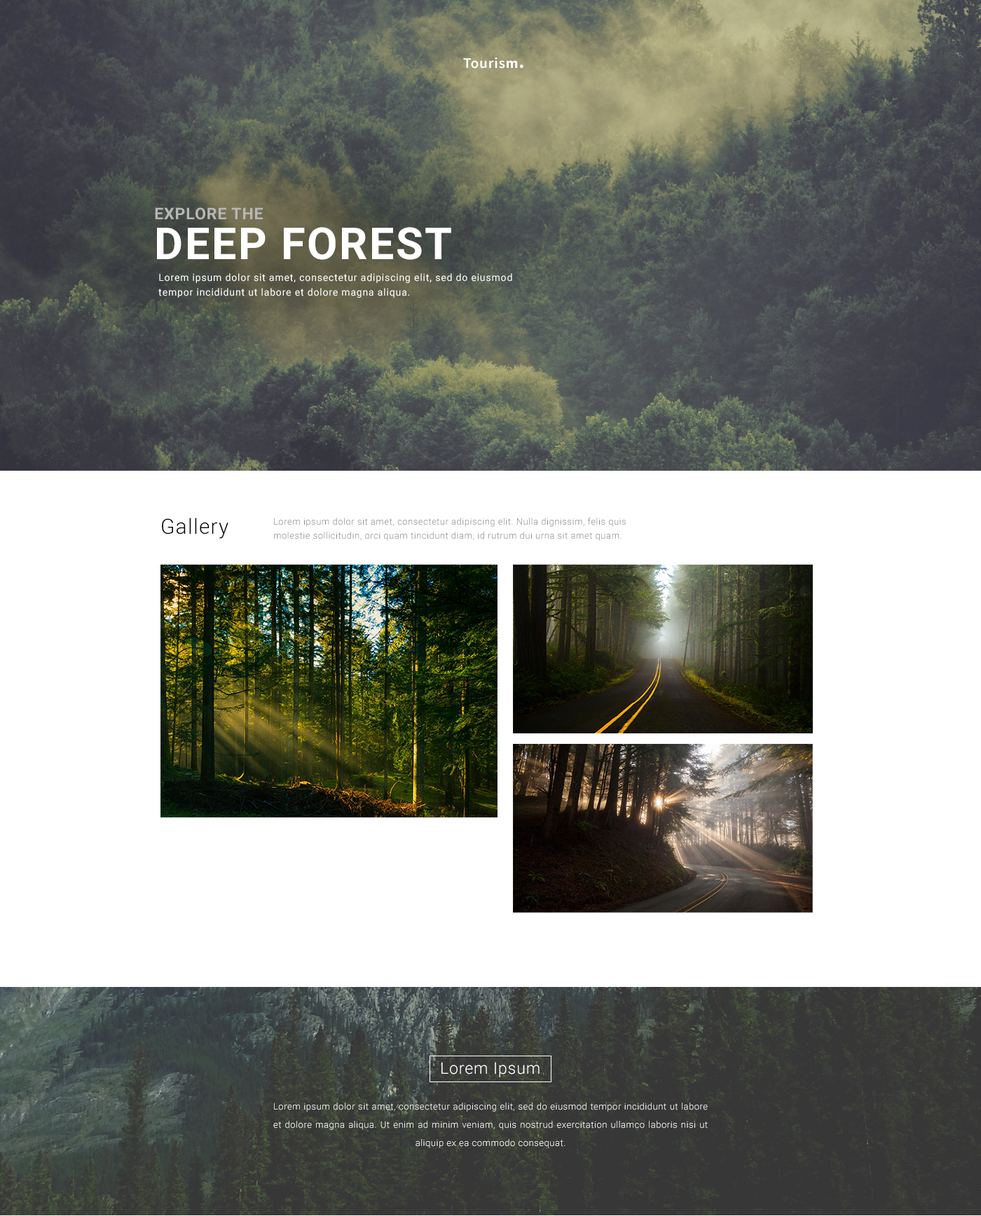
<style>
.page{position:relative;width:981px;height:1216px;background:#ffffff}
.page>*{position:absolute;margin:0}
.t1{font:14.7px "SourceSansPro-Semibold";letter-spacing:0.04em;color:#ffffff}
.t2{font:14.7px "SourceSansPro-Bold";letter-spacing:0.04em;color:#ffffff}
.t3{font:22.4px "SourceSansPro-Semibold";letter-spacing:0.04em;color:#ffffff}
.t4{font:16.1px/39.9px "Roboto-Bold";letter-spacing:0.04em;color:#b7b7b7}
.t5{font:44.1px/39.9px "Roboto-Bold";letter-spacing:0.04em;color:#ffffff}
.t6{font:9.8px/14.7px "Roboto-Regular";letter-spacing:0.06em;color:#ffffff}
.t7{font:21px "Roboto-Light";letter-spacing:0.04em;color:#000000}
.t8{font:9.1px/14px "Roboto-Light";letter-spacing:0.04em;color:#8a8a8a}
.t9{font:16.1px "Roboto-Light";letter-spacing:0.04em;color:#ffffff}
.t10{font:9.1px/18.2px "Roboto-Light";letter-spacing:0.04em;color:#ffffff}
</style>
<div class="page">
<p class="t1" style="left:463px;top:57px;width:55px;height:12px">Touris<span class="t2">m</span></p>
<p class="t3" style="left:520px;top:64px;width:3px;height:5px">.</p>
<p class="t4" style="left:155px;top:207px;width:296px;height:53px">EXPLORE THE<br><span class="t5">DEEP FOREST</span></p>
<p class="t6" style="left:158px;top:273px;width:354px;height:25px">Lorem ipsum dolor sit amet, consectetur adipiscing elit, sed do eiusmod tempor incididunt ut labore et dolore magna aliqua.</p>
<p class="t7" style="left:162px;top:518px;width:66px;height:21px">Gallery</p>
<p class="t8" style="left:274px;top:518px;width:352px;height:23px">Lorem ipsum dolor sit amet, consectetur adipiscing elit. Nulla dignissim, felis quis molestie sollicitudin, orci quam tincidunt diam, id rutrum dui urna sit amet quam.</p>
<p class="t9" style="left:441px;top:1062px;width:98px;height:15px">Lorem Ipsum</p>
<p class="t10" style="left:273px;top:1103px;width:434px;height:45px;text-align:justify">Lorem ipsum dolor sit amet, consectetur adipiscing elit, sed do eiusmod tempor incididunt ut labore et dolore magna aliqua. Ut enim ad minim veniam, quis nostrud exercitation ullamco laboris nisi ut aliquip ex ea commodo consequat.</p>
</div>
